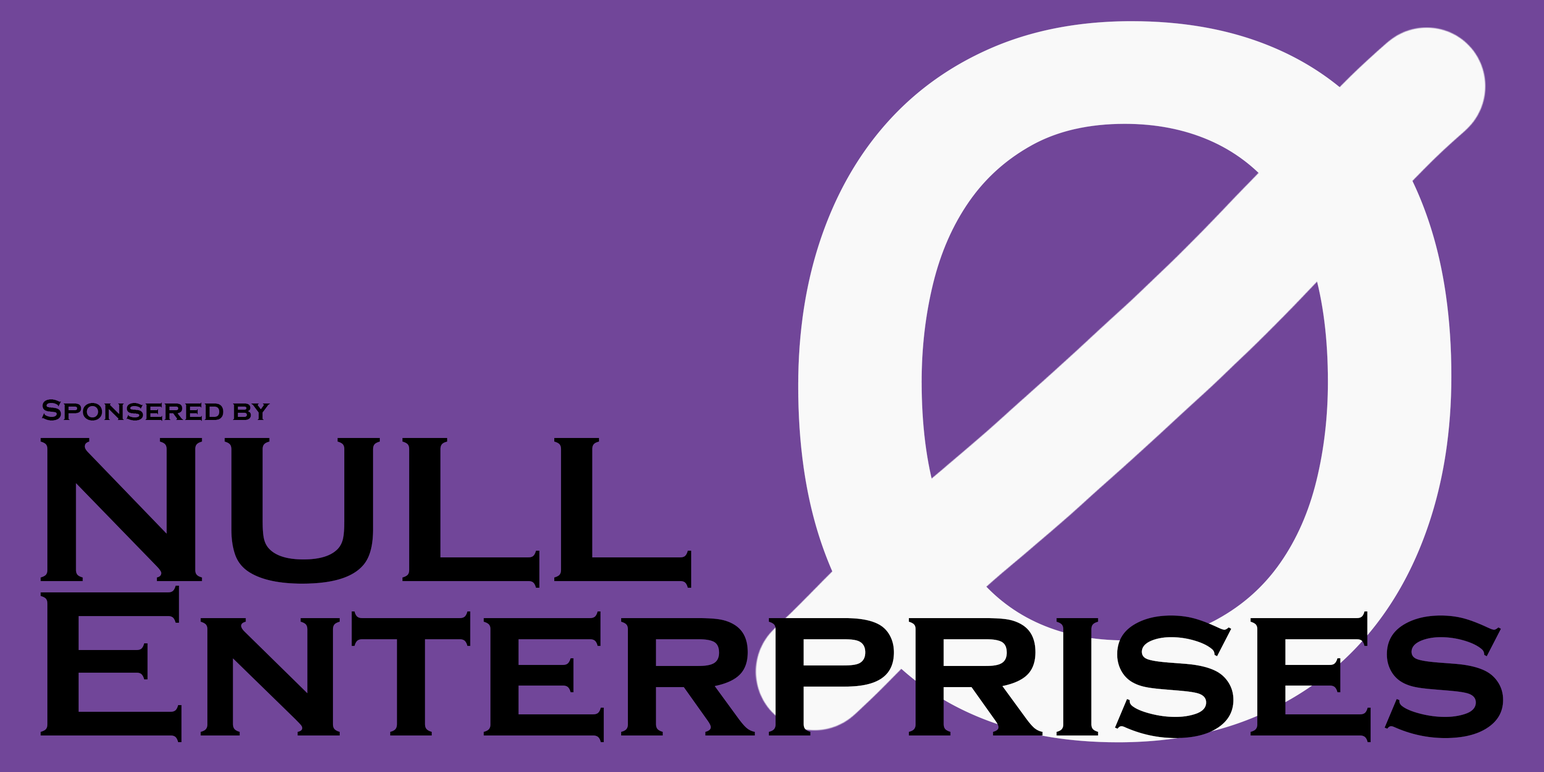
<style>
.page{position:relative;width:1544px;height:772px;background:#714699}
.page>*{position:absolute;margin:0}
.t1{font:1420.1px "Consolas";color:#f9f9f9}
.t2{font:30px "CopperplateGothic-Bold";color:#000000}
.t3{font:214.5px/154.4px "CopperplateGothic-Bold";color:#000000}
</style>
<div class="page">
<p class="t1" style="left:798px;top:21px;width:654px;height:722px">o</p>
<p class="t2" style="left:42px;top:399px;width:228px;height:22px">Sponsered by</p>
<p class="t3" style="left:41px;top:438px;width:1463px;height:304px">NULL<br>Enterprises</p>
</div>
